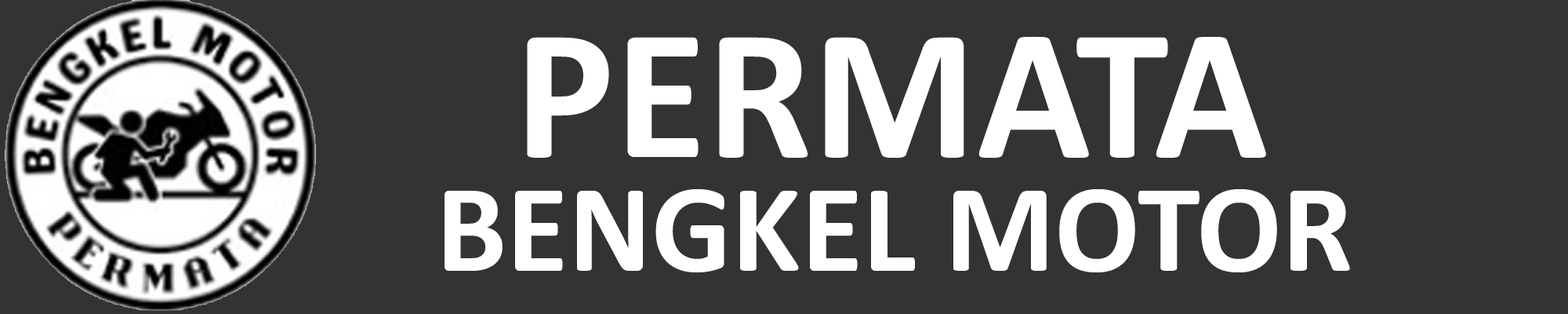
<style>
.page{position:relative;width:1568px;height:314px;background:#333333}
.page>*{position:absolute;margin:0}
.t1{font:188.2px "Calibri-Bold";color:#ffffff}
.t2{font:126.2px "Calibri-Bold";color:#ffffff}
</style>
<div class="page">
<p class="t1" style="left:527px;top:36px;width:739px;height:122px">PERMATA</p>
<p class="t2" style="left:445px;top:189px;width:905px;height:83px">BENGKEL MOTOR</p>
</div>
